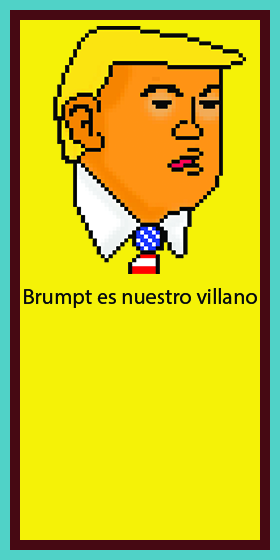
<style>
.page{position:relative;width:280px;height:560px;background:#f5f207}
.page>*{position:absolute;margin:0}
.t1{font:22px "MyriadPro-Regular";color:#060808}
</style>
<div class="page">
<p class="t1" style="left:24px;top:288px;width:233px;height:20px">Brumpt es nuestro villano</p>
</div>
